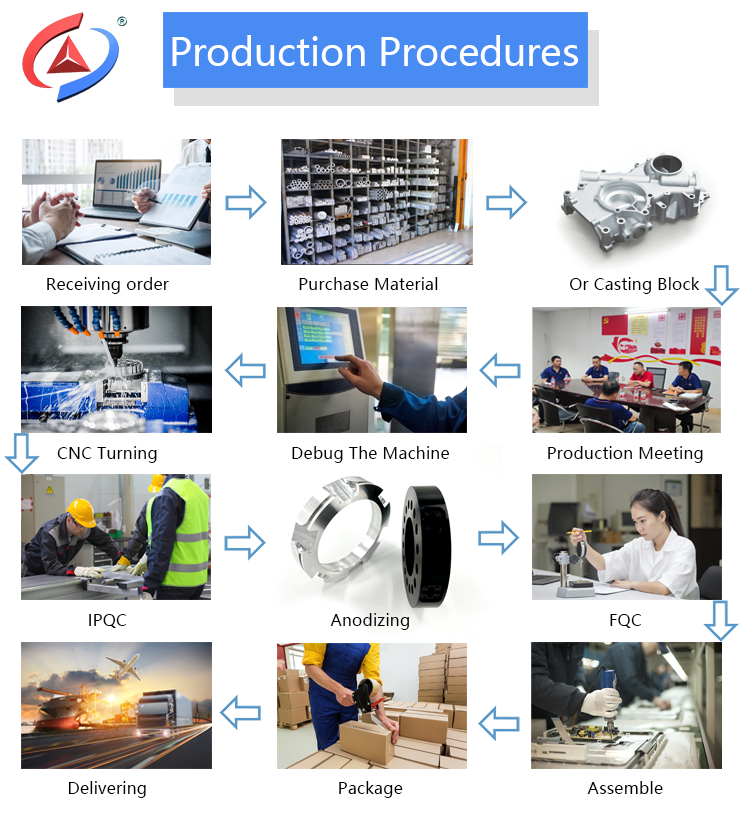
<style>
.page{position:relative;width:750px;height:820px;background:#ffffff}
.page>*{position:absolute;margin:0}
.t1{font:37.5px "MicrosoftYaHei";color:#ffffff}
.t2{font:16.4px "MicrosoftYaHei";color:#000000}
</style>
<div class="page">
<p class="t1" style="left:172px;top:35px;width:406px;height:31px">Production Procedures</p>
<p class="t2" style="left:47px;top:277px;width:122px;height:17px">Receiving order</p>
<p class="t2" style="left:299px;top:277px;width:139px;height:13px">Purchase Material</p>
<p class="t2" style="left:570px;top:277px;width:130px;height:17px">Or Casting Block</p>
<p class="t2" style="left:57px;top:446px;width:100px;height:17px">CNC Turning</p>
<p class="t2" style="left:292px;top:446px;width:157px;height:17px">Debug The Machine</p>
<p class="t2" style="left:548px;top:446px;width:155px;height:17px">Production Meeting</p>
<p class="t2" style="left:89px;top:614px;width:37px;height:14px">IPQC</p>
<p class="t2" style="left:330px;top:613px;width:79px;height:17px">Anodizing</p>
<p class="t2" style="left:610px;top:614px;width:31px;height:14px">FQC</p>
<p class="t2" style="left:68px;top:781px;width:78px;height:17px">Delivering</p>
<p class="t2" style="left:339px;top:781px;width:64px;height:17px">Package</p>
<p class="t2" style="left:587px;top:781px;width:76px;height:13px">Assemble</p>
</div>
